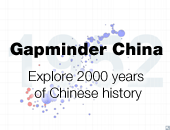
<style>
.page{position:relative;width:170px;height:130px;background:#ffffff}
.page>*{position:absolute;margin:0}
.t1{font:17px "HelveticaNeueLTStd-Blk";color:#000000}
.t2{font:14px "HelveticaNeueLTStd-Lt";color:#000000}
</style>
<div class="page">
<p class="t1" style="left:10px;top:42px;width:153px;height:16px">Gapminder China</p>
<p class="t2" style="left:29px;top:71px;width:115px;height:30px;text-align:center">Explore 2000 years <br>of Chinese history</p>
</div>
